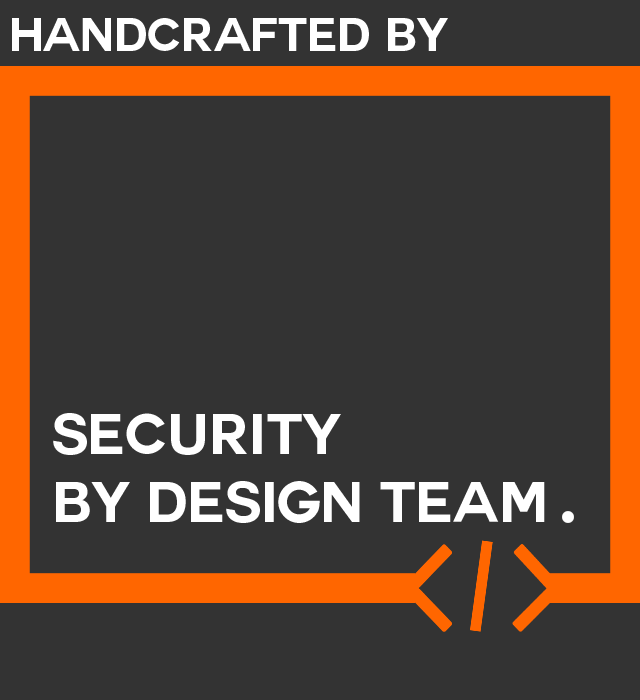
<style>
.page{position:relative;width:640px;height:700px;background:#333333}
.page>*{position:absolute;margin:0}
.t1{font:56.4px "Couture-Bold";color:#ffffff}
</style>
<div class="page">
<p class="t1" style="left:53px;top:413px;width:492px;height:110px">SECURITY <br>BY DESIGN TEAM</p>
</div>
